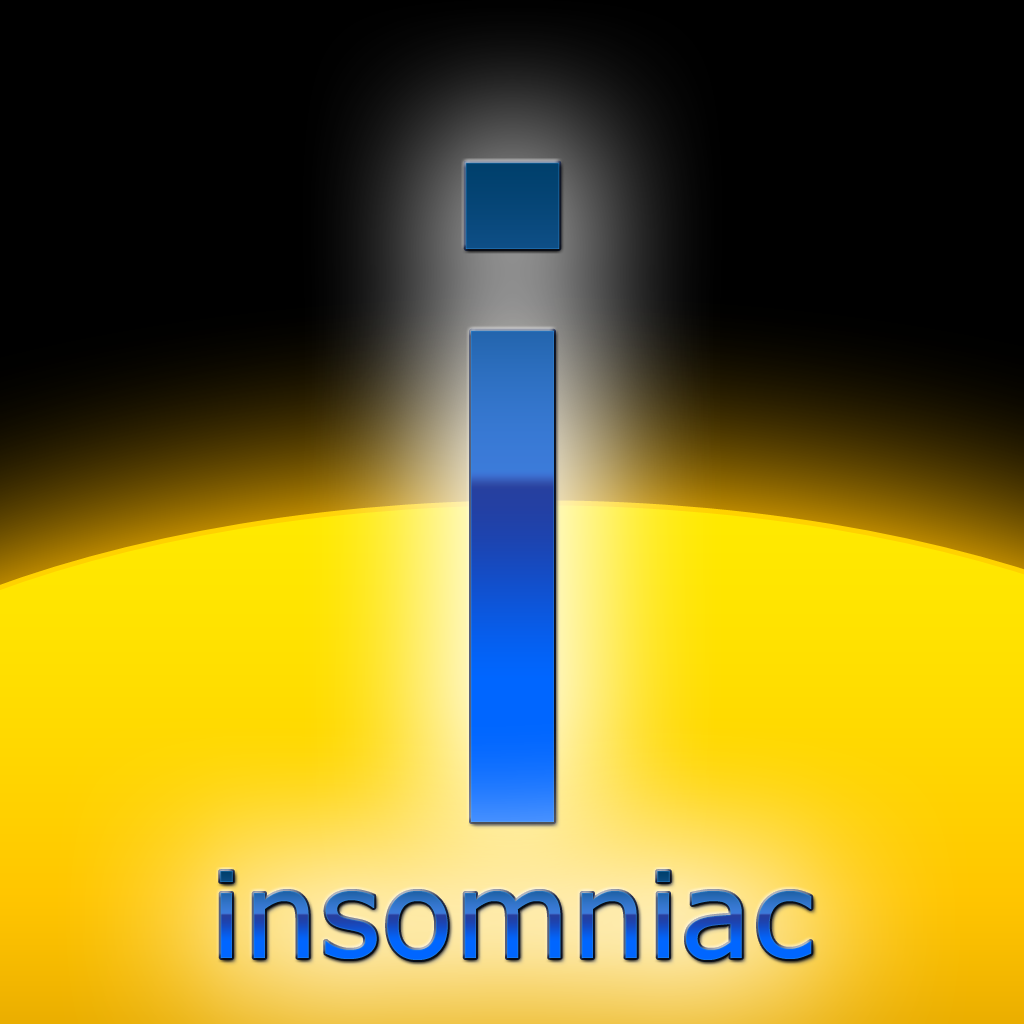
<style>
.page{position:relative;width:1024px;height:1024px}
.page>*{position:absolute;margin:0}
.t1{font:900px "Verdana"}
.t2{font:120px "Verdana"}
</style>
<div class="page">
<p class="t1" style="left:465px;top:162px;width:95px;height:660px">i</p>
<p class="t2" style="left:220px;top:871px;width:592px;height:89px">insomniac</p>
</div>
